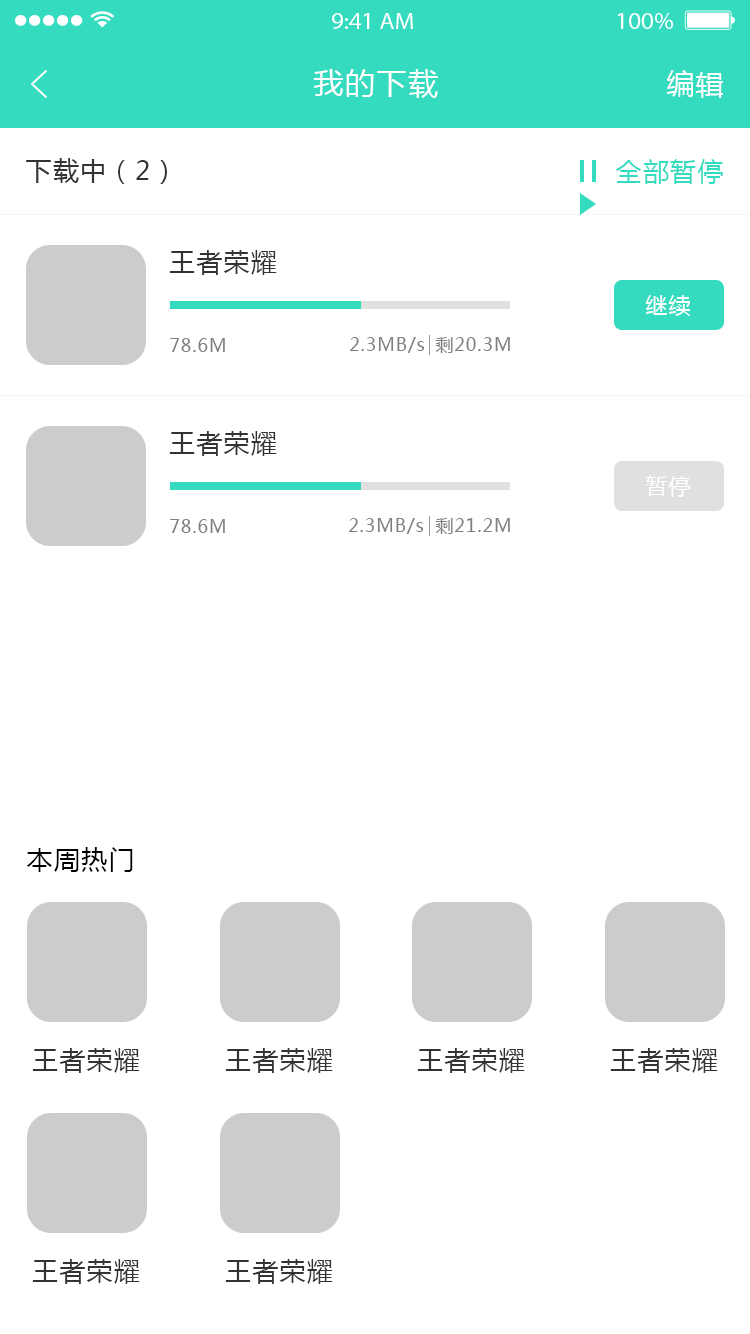
<style>
.page{position:relative;width:750px;height:1334px;background:#ffffff}
.page>*{position:absolute;margin:0}
.t1{font:30px "MicrosoftYaHei";letter-spacing:0.05em;color:#ffffff}
.t2{font:28px "MicrosoftYaHei";letter-spacing:0.05em;color:#ffffff}
.t3{font:26px "MicrosoftYaHei";letter-spacing:0.05em;color:#333333}
.t4{font:26px "MicrosoftYaHei";letter-spacing:0.05em;color:#34dbbf}
.t5{font:22px "MicrosoftYaHei";letter-spacing:0.05em;color:#ffffff}
.t6{font:18px "MicrosoftYaHei";letter-spacing:0.05em;color:#808080}
.t7{font:26px "MicrosoftYaHei";letter-spacing:0.05em;color:#000000}
</style>
<div class="page">
<p class="t1" style="left:313px;top:69px;width:125px;height:29px">我的下载</p>
<p class="t2" style="left:666px;top:70px;width:57px;height:28px">编辑</p>
<p class="t3" style="left:26px;top:158px;width:141px;height:26px">下载中（2）</p>
<p class="t4" style="left:615px;top:159px;width:108px;height:25px">全部暂停</p>
<p class="t3" style="left:169px;top:250px;width:108px;height:25px">王者荣耀</p>
<p class="t5" style="left:645px;top:295px;width:46px;height:21px">继续</p>
<p class="t6" style="left:170px;top:338px;width:55px;height:14px">78.6M</p>
<p class="t6" style="left:350px;top:337px;width:75px;height:16px">2.3MB/s</p>
<p class="t6" style="left:435px;top:337px;width:75px;height:16px">剩20.3M</p>
<p class="t3" style="left:169px;top:431px;width:108px;height:25px">王者荣耀</p>
<p class="t5" style="left:645px;top:475px;width:45px;height:22px">暂停</p>
<p class="t6" style="left:170px;top:519px;width:55px;height:14px">78.6M</p>
<p class="t6" style="left:349px;top:518px;width:75px;height:16px">2.3MB/s</p>
<p class="t6" style="left:435px;top:518px;width:75px;height:16px">剩21.2M</p>
<p class="t7" style="left:27px;top:847px;width:106px;height:25px">本周热门</p>
<p class="t3" style="left:32px;top:1048px;width:108px;height:25px">王者荣耀</p>
<p class="t3" style="left:225px;top:1048px;width:108px;height:25px">王者荣耀</p>
<p class="t3" style="left:417px;top:1048px;width:108px;height:25px">王者荣耀</p>
<p class="t3" style="left:610px;top:1048px;width:108px;height:25px">王者荣耀</p>
<p class="t3" style="left:32px;top:1259px;width:108px;height:25px">王者荣耀</p>
<p class="t3" style="left:225px;top:1259px;width:108px;height:25px">王者荣耀</p>
</div>
